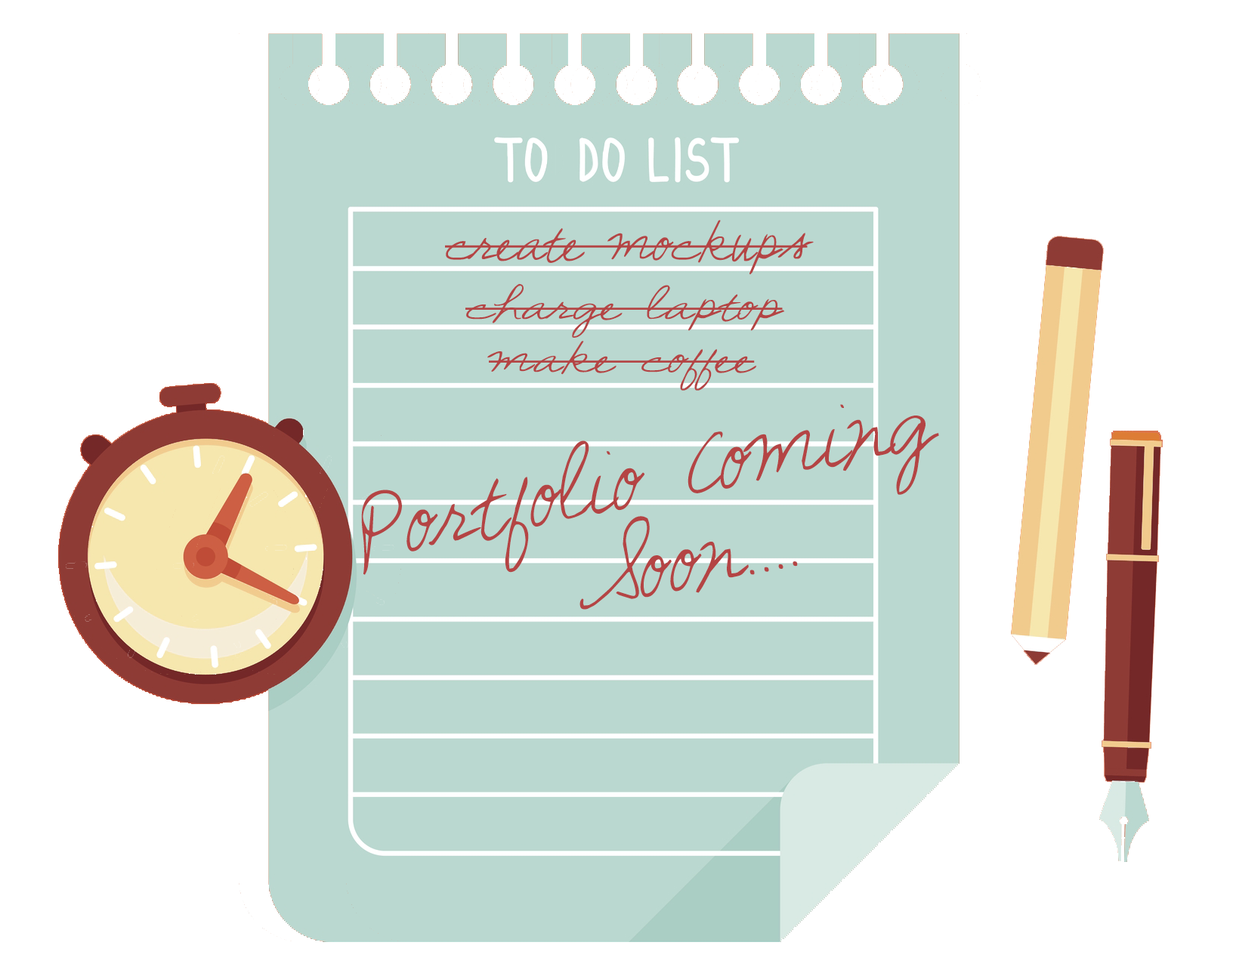
<style>
.page{position:relative;width:1233px;height:967px;background:#ffffff}
.page>*{position:absolute;margin:0}
.t1{font:44.1px "SunshineInMySoul";color:#b44444}
.t2{font:34.4px "SunshineInMySoul";color:#b44444;scale:1.28 1}
.t3{font:75.6px "SunshineInMySoul";color:#b44444}
</style>
<div class="page">
<p class="t1" style="left:445px;top:220px;width:369px;height:55px">create mockups</p>
<p class="t2" style="left:465px;top:283px;width:320px;height:55px">charge laptop</p>
<p class="t2" style="left:487px;top:341px;width:270px;height:50px">make coffee</p>
<p class="t3" style="left:361px;top:404px;width:578px;height:206px;text-align:center;rotate:-11deg">Portfolio Coming<br> Soon....</p>
</div>
